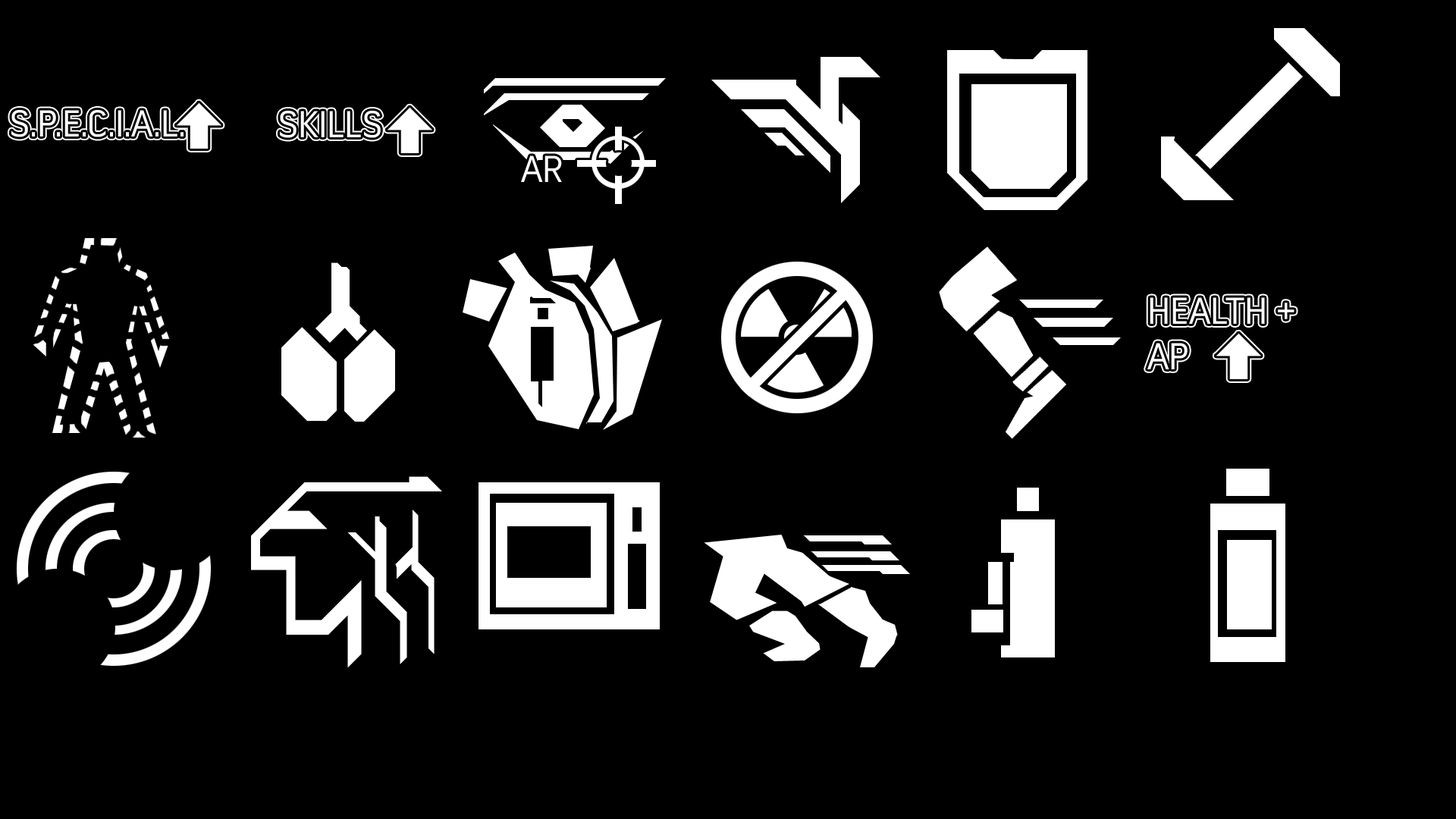
<style>
.page{position:relative;width:1456px;height:819px;background:#000000}
.page>*{position:absolute;margin:0}
.t1{font:37.9px "ConvectionRegular";color:#ffffff}
</style>
<div class="page">
<p class="t1" style="left:11px;top:110px;width:173px;height:27px">S.P.E.C.I.A.L.</p>
<p class="t1" style="left:11px;top:110px;width:173px;height:27px">S.P.E.C.I.A.L.</p>
<p class="t1" style="left:280px;top:111px;width:101px;height:27px">SKILLS</p>
<p class="t1" style="left:280px;top:111px;width:101px;height:27px">SKILLS</p>
<p class="t1" style="left:521px;top:155px;width:41px;height:27px">AR</p>
<p class="t1" style="left:1147px;top:297px;width:147px;height:72px">HEALTH +<br>AP</p>
<p class="t1" style="left:1147px;top:297px;width:147px;height:72px">HEALTH +<br>AP</p>
</div>
